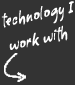
<style>
.page{position:relative;width:75px;height:85px;background:#333333}
.page>*{position:absolute;margin:0}
.t1{font:20.8px "Romy";color:#ffffff}
</style>
<div class="page">
<p class="t1" style="left:1px;top:1px;width:73px;height:49px;text-align:center">technology I work with</p>
</div>
